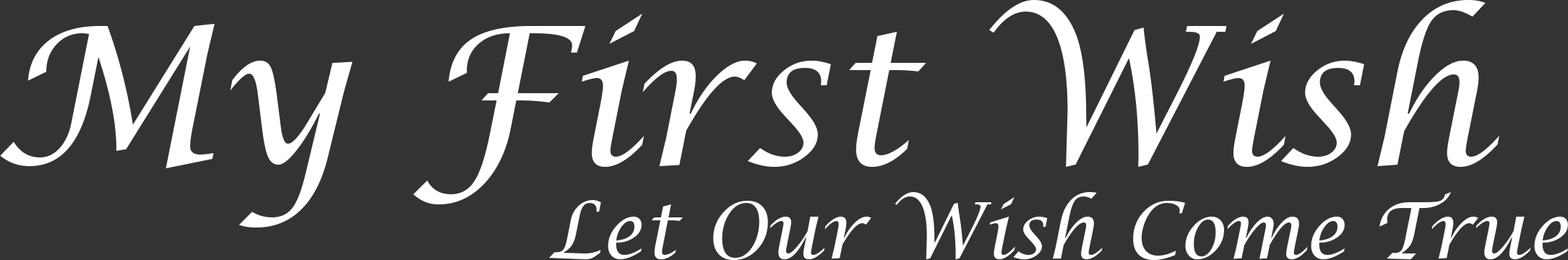
<style>
.page{position:relative;width:1568px;height:260px;background:#333333}
.page>*{position:absolute;margin:0}
.t1{font:192.3px "LucidaCalligraphy-Italic";color:#ffffff}
.t2{font:78.3px "LucidaCalligraphy-Italic";color:#ffffff}
</style>
<div class="page">
<p class="t1" style="left:0px;top:0px;width:1499px;height:228px">My First Wish</p>
<p class="t2" style="left:548px;top:192px;width:1020px;height:68px">Let Our Wish Come True</p>
</div>
